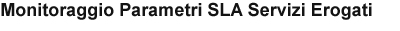
<style>
.page{position:relative;width:400px;height:31px;background:#ffffff}
.page>*{position:absolute;margin:0}
.t1{font:18px "Arial-BoldMT";color:#131313}
</style>
<div class="page">
<p class="t1" style="left:1px;top:2px;width:371px;height:18px">Monitoraggio Parametri SLA Servizi Erogati</p>
</div>
